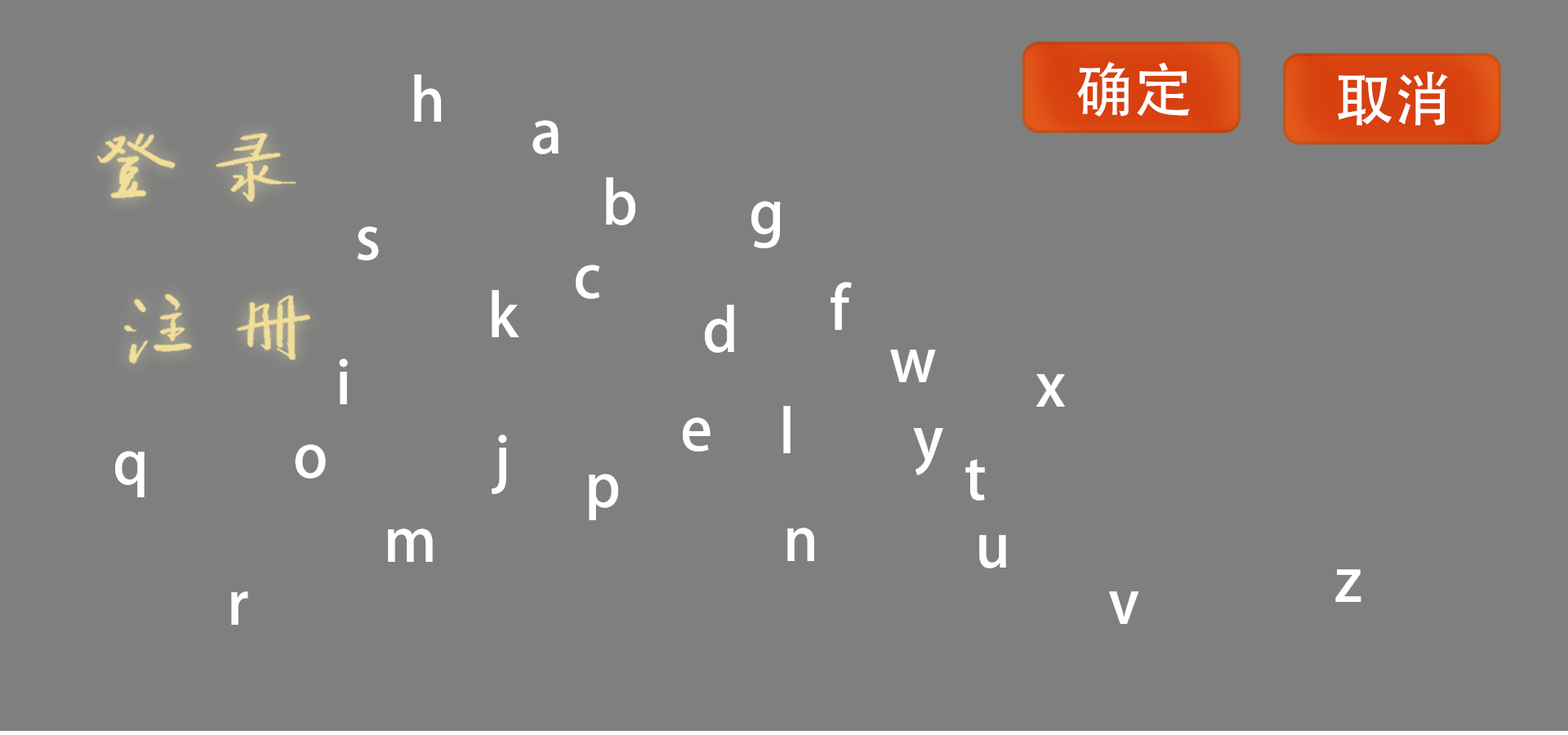
<style>
.page{position:relative;width:1568px;height:735px;background:#7f7f7f}
.page>*{position:absolute;margin:0}
.t1{font:58.8px "AdobeHeitiStd-Regular";color:#ffffff}
</style>
<div class="page">
<p class="t1" style="left:414px;top:74px;width:27px;height:48px">h</p>
<p class="t1" style="left:532px;top:120px;width:27px;height:34px">a</p>
<p class="t1" style="left:606px;top:177px;width:29px;height:48px">b</p>
<p class="t1" style="left:751px;top:201px;width:30px;height:47px">g</p>
<p class="t1" style="left:357px;top:226px;width:22px;height:35px">s</p>
<p class="t1" style="left:576px;top:265px;width:23px;height:34px">c</p>
<p class="t1" style="left:831px;top:282px;width:21px;height:48px">f</p>
<p class="t1" style="left:492px;top:290px;width:27px;height:47px">k</p>
<p class="t1" style="left:705px;top:305px;width:29px;height:48px">d</p>
<p class="t1" style="left:890px;top:350px;width:46px;height:32px">w</p>
<p class="t1" style="left:339px;top:359px;width:9px;height:45px">i</p>
<p class="t1" style="left:1036px;top:374px;width:29px;height:33px">x</p>
<p class="t1" style="left:783px;top:406px;width:8px;height:47px">l</p>
<p class="t1" style="left:683px;top:417px;width:27px;height:35px">e</p>
<p class="t1" style="left:491px;top:434px;width:16px;height:60px">j</p>
<p class="t1" style="left:913px;top:428px;width:30px;height:47px">y</p>
<p class="t1" style="left:295px;top:444px;width:31px;height:35px">o</p>
<p class="t1" style="left:115px;top:451px;width:30px;height:46px">q</p>
<p class="t1" style="left:965px;top:459px;width:20px;height:42px">t</p>
<p class="t1" style="left:589px;top:474px;width:29px;height:46px">p</p>
<p class="t1" style="left:388px;top:528px;width:45px;height:34px">m</p>
<p class="t1" style="left:787px;top:528px;width:27px;height:33px">n</p>
<p class="t1" style="left:979px;top:535px;width:27px;height:33px">u</p>
<p class="t1" style="left:1335px;top:569px;width:26px;height:33px">z</p>
<p class="t1" style="left:231px;top:591px;width:17px;height:34px">r</p>
<p class="t1" style="left:1109px;top:591px;width:30px;height:33px">v</p>
</div>
